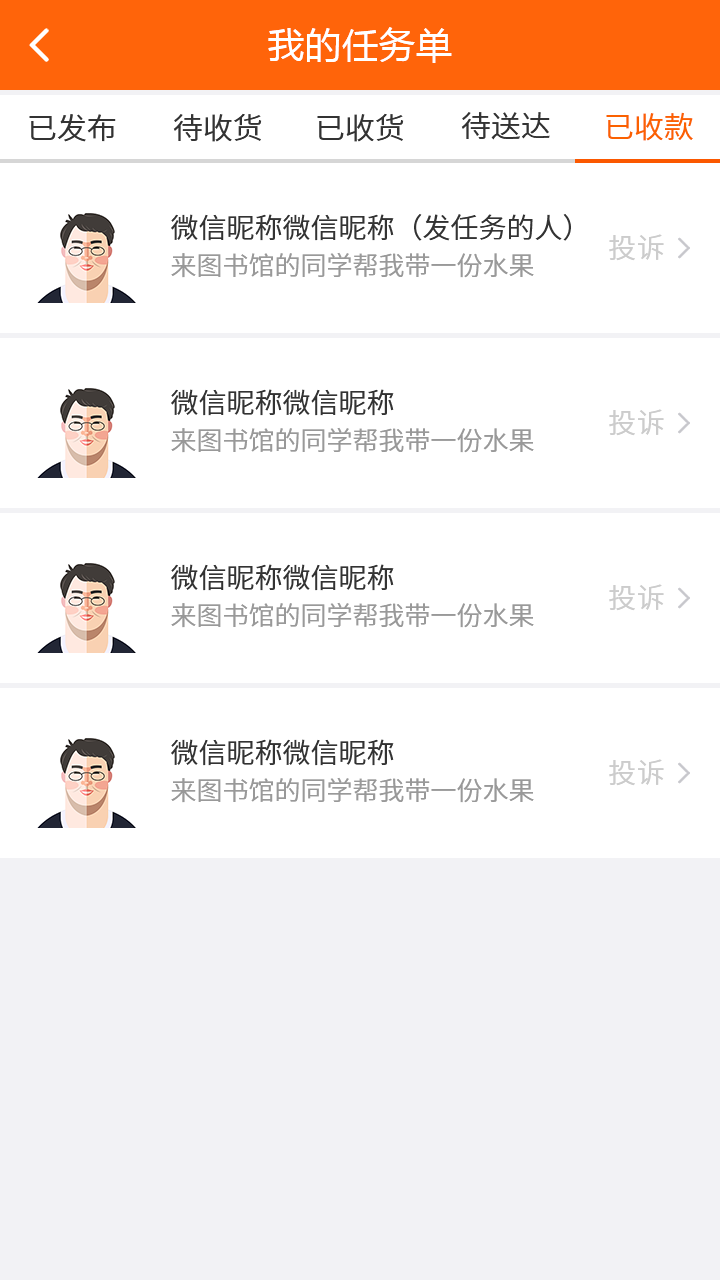
<style>
.page{position:relative;width:720px;height:1280px;background:#ffffff}
.page>*{position:absolute;margin:0}
.t1{font:36px "MicrosoftYaHei";letter-spacing:0.03em;color:#ffffff}
.t2{font:30px "NotoSansCJKsc-DemiLight";color:#333333;font-variant:small-caps}
.t3{font:30px "NotoSansCJKsc-DemiLight";color:#fb6100;font-variant:small-caps}
.t4{font:28px "NotoSansCJKsc-DemiLight";color:#333333;font-variant:small-caps}
.t5{font:28px "NotoSansCJKsc-DemiLight";letter-spacing:0.03em;color:#cccccc;font-variant:small-caps}
.t6{font:26px "NotoSansCJKsc-DemiLight";color:#999999;font-variant:small-caps}
</style>
<div class="page">
<p class="t1" style="left:268px;top:27px;width:184px;height:36px">我的任务单</p>
<p class="t2" style="left:173px;top:113px;width:89px;height:29px">待收货</p>
<p class="t2" style="left:317px;top:113px;width:87px;height:29px">已收货</p>
<p class="t2" style="left:461px;top:112px;width:89px;height:28px">待送达</p>
<p class="t3" style="left:606px;top:112px;width:87px;height:29px">已收款</p>
<p class="t2" style="left:29px;top:114px;width:87px;height:28px">已发布</p>
<p class="t4" style="left:171px;top:214px;width:400px;height:27px">微信昵称微信昵称（发任务的人）</p>
<p class="t5" style="left:609px;top:234px;width:55px;height:27px">投诉</p>
<p class="t6" style="left:171px;top:252px;width:363px;height:26px">来图书馆的同学帮我带一份水果</p>
<p class="t4" style="left:171px;top:389px;width:223px;height:27px">微信昵称微信昵称</p>
<p class="t5" style="left:609px;top:409px;width:55px;height:27px">投诉</p>
<p class="t6" style="left:171px;top:427px;width:363px;height:26px">来图书馆的同学帮我带一份水果</p>
<p class="t4" style="left:171px;top:564px;width:223px;height:27px">微信昵称微信昵称</p>
<p class="t5" style="left:609px;top:584px;width:55px;height:27px">投诉</p>
<p class="t6" style="left:171px;top:602px;width:363px;height:26px">来图书馆的同学帮我带一份水果</p>
<p class="t4" style="left:171px;top:739px;width:223px;height:27px">微信昵称微信昵称</p>
<p class="t5" style="left:609px;top:759px;width:55px;height:27px">投诉</p>
<p class="t6" style="left:171px;top:777px;width:363px;height:26px">来图书馆的同学帮我带一份水果</p>
</div>
